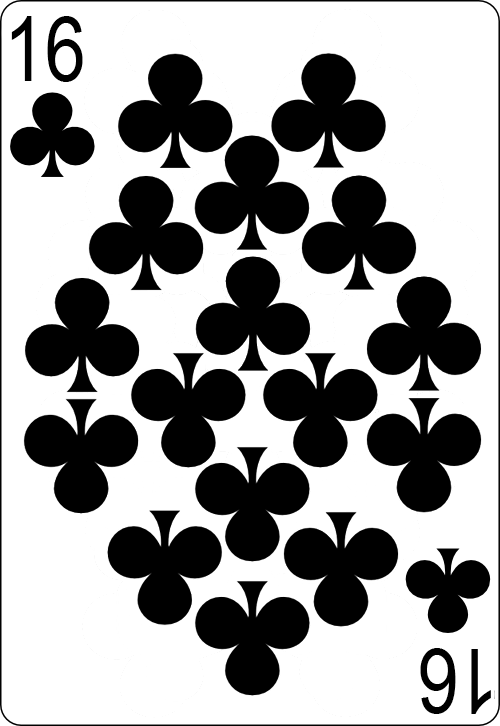
<style>
.page{position:relative;width:500px;height:726px;background:#ffffff}
.page>*{position:absolute;margin:0}
.t1{font:89.8px "ArialNarrow";color:#000000}
</style>
<div class="page">
<p class="t1" style="left:11px;top:16px;width:72px;height:66px">16</p>
<p class="t1" style="left:420px;top:648px;width:71px;height:66px;rotate:180deg">16</p>
</div>
